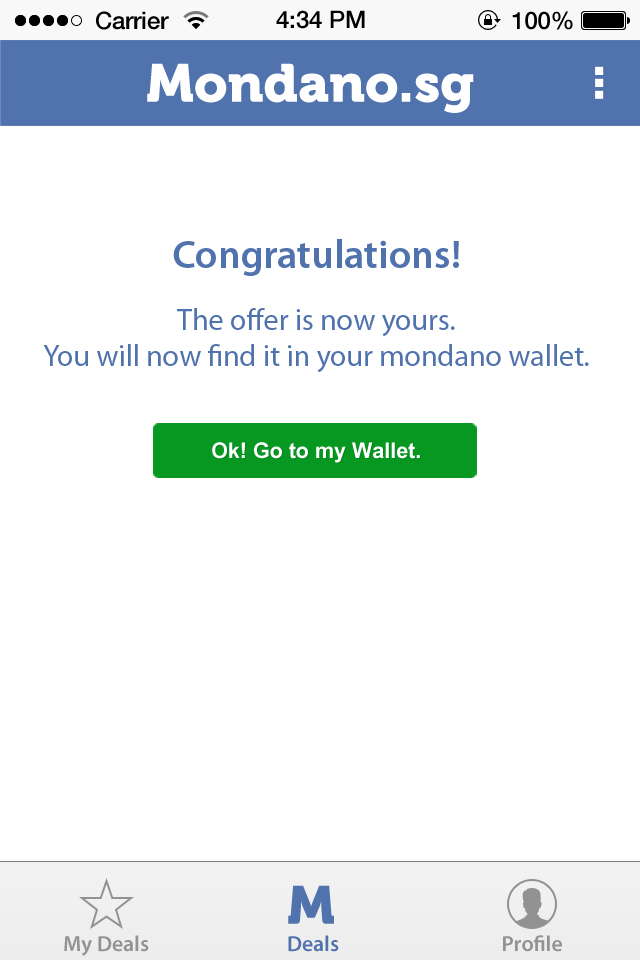
<style>
.page{position:relative;width:640px;height:960px;background:#ffffff}
.page>*{position:absolute;margin:0}
.t1{font:24px "HelveticaNeue-Medium";color:#000000}
.t2{font:53.3px "Museo900-Regular";color:#ffffff}
.t3{font:40px "MyriadPro-Semibold";color:#5173ad}
.t4{font:30px "MyriadPro-Regular";color:#5173ad}
.t5{font:30px "Utsaah-Bold";color:#ffffff}
.t6{font:53.3px "Museo900-Regular";color:#5173ad}
.t7{font:22px "MyriadPro-Semibold";color:#929292}
.t8{font:22px "MyriadPro-Semibold";color:#5173ad}
</style>
<div class="page">
<p class="t1" style="left:96px;top:11px;width:73px;height:19px">Carrier</p>
<p class="t1" style="left:276px;top:10px;width:89px;height:19px">4:34 PM</p>
<p class="t1" style="left:512px;top:11px;width:61px;height:19px">100%</p>
<p class="t2" style="left:147px;top:63px;width:327px;height:50px">Mondano.sg</p>
<p class="t3" style="left:173px;top:239px;width:286px;height:37px">Congratulations!</p>
<p class="t4" style="left:43px;top:308px;width:546px;height:65px;text-align:center">The offer is now yours.<br>You will now find it in your mondano wallet.</p>
<p class="t5" style="left:212px;top:442px;width:208px;height:21px">Ok! Go to my Wallet.</p>
<p class="t6" style="left:288px;top:885px;width:46px;height:39px">M</p>
<p class="t7" style="left:64px;top:935px;width:85px;height:21px">My Deals</p>
<p class="t8" style="left:288px;top:935px;width:51px;height:17px">Deals</p>
<p class="t7" style="left:503px;top:935px;width:59px;height:17px">Profile</p>
</div>
